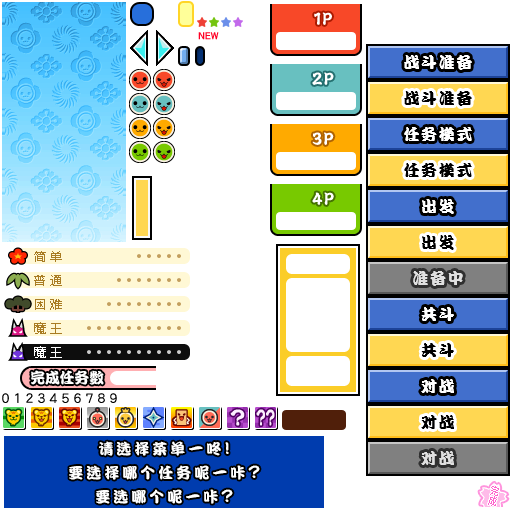
<style>
.page{position:relative;width:512px;height:512px;background:#ffffff}
.page>*{position:absolute;margin:0}
.t1{font:16px "DFPKanTingLiuW9";letter-spacing:0.1em;color:#ffffff}
.t2{font:16px "DFPKanTingLiuW9";letter-spacing:0.1em;color:#000000}
.t3{font:12px "MicrosoftYaHei";color:#a97c23}
.t4{font:16px "DFPKanTingLiuW9";letter-spacing:0.1em;color:#e0e0e0}
.t5{font:12px "MicrosoftYaHei";color:#ffffff}
.t6{font:15px "DFPKanTingLiuW9";letter-spacing:-0.02em;color:#ffffff}
.t7{font:15px "DFPKanTingLiuW9";letter-spacing:0.2em;color:#ffffff}
.t8{font:17px "DFPKanTingLiuW9";letter-spacing:0.2em;color:#ffffff}
.t9{font:18px "DFPKanTingLiuW9";letter-spacing:0.2em;color:#ffffff}
.t10{font:9.9px "MicrosoftYaHei";letter-spacing:0.1em;color:#ff63cd;scale:0.89 1}
</style>
<div class="page">
<p class="t1" style="left:404px;top:55px;width:68px;height:15px">战斗准备</p>
<p class="t2" style="left:404px;top:91px;width:68px;height:15px">战斗准备</p>
<p class="t1" style="left:404px;top:127px;width:68px;height:14px">任务模式</p>
<p class="t2" style="left:404px;top:163px;width:68px;height:14px">任务模式</p>
<p class="t1" style="left:422px;top:199px;width:32px;height:15px">出发</p>
<p class="t2" style="left:422px;top:235px;width:32px;height:15px">出发</p>
<p class="t3" style="left:34px;top:251px;width:28px;height:11px">简 单</p>
<p class="t3" style="left:34px;top:275px;width:28px;height:11px">普 通</p>
<p class="t4" style="left:413px;top:271px;width:50px;height:15px">准备中</p>
<p class="t3" style="left:35px;top:299px;width:27px;height:11px">困 难</p>
<p class="t1" style="left:421px;top:307px;width:33px;height:14px">共斗</p>
<p class="t3" style="left:34px;top:322px;width:28px;height:12px">魔 王</p>
<p class="t5" style="left:34px;top:346px;width:28px;height:12px">魔 王</p>
<p class="t2" style="left:421px;top:343px;width:33px;height:14px">共斗</p>
<p class="t6" style="left:31px;top:370px;width:73px;height:15px">完成任务数</p>
<p class="t1" style="left:421px;top:379px;width:33px;height:14px">对战</p>
<p class="t2" style="left:421px;top:415px;width:33px;height:14px">对战</p>
<p class="t7" style="left:99px;top:441px;width:130px;height:15px">请选择菜单一咚<span class="t8">!</span></p>
<p class="t4" style="left:421px;top:451px;width:33px;height:14px">对战</p>
<p class="t7" style="left:69px;top:465px;width:191px;height:15px">要选择哪个任务呢一咔<span class="t9">?</span></p>
<p class="t10" style="left:488px;top:486px;width:11px;height:20px;rotate:17deg">完成</p>
<p class="t7" style="left:96px;top:489px;width:137px;height:15px">要选哪个呢一咔<span class="t9">?</span></p>
</div>
